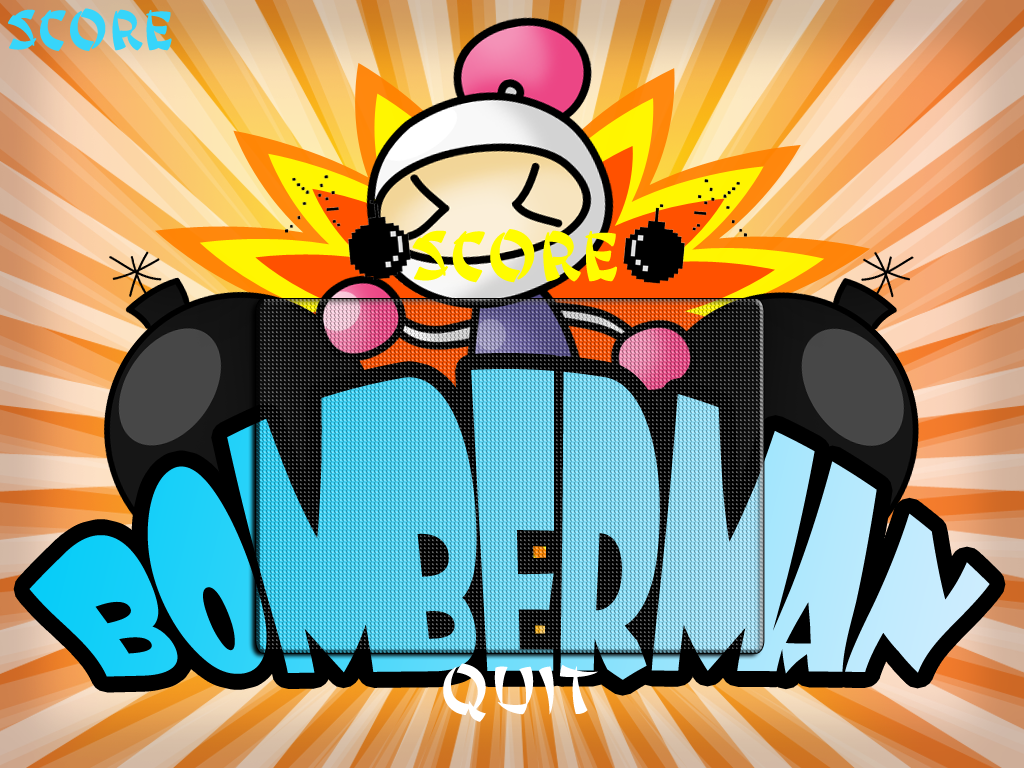
<style>
.page{position:relative;width:1024px;height:768px}
.page>*{position:absolute;margin:0}
.t1{font:48px "JingJing";color:#37d5fa;font-weight:bold}
.t2{font:60px "JingJing";color:#fffc00;font-weight:bold}
.t3{font:60px "JingJing";color:#ffffff}
</style>
<div class="page">
<p class="t1" style="left:8px;top:8px;width:164px;height:43px">SCORE</p>
<p class="t2" style="left:412px;top:229px;width:205px;height:54px">SCORE</p>
<p class="t3" style="left:443px;top:663px;width:155px;height:59px;text-align:center">QUIT<br>u</p>
</div>
